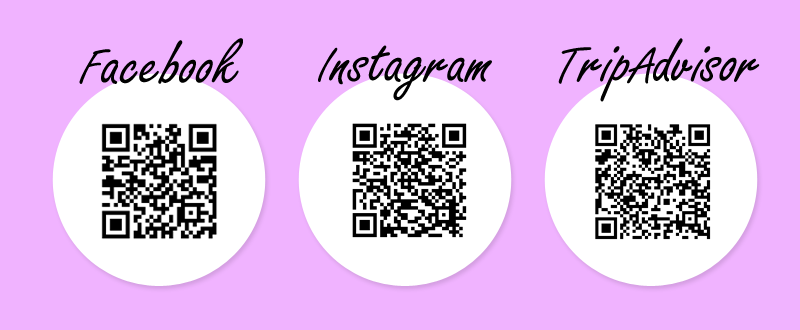
<style>
.page{position:relative;width:800px;height:330px;background:#f0b3ff}
.page>*{position:absolute;margin:0}
.t1{font:75px "DSNFreeJack";color:#000000}
.t2{font:75px "DSNFreeJack";color:#010101}
</style>
<div class="page">
<p class="t1" style="left:79px;top:38px;width:164px;height:46px">Facebook</p>
<p class="t2" style="left:558px;top:38px;width:202px;height:64px">TripAdvisor</p>
<p class="t1" style="left:318px;top:45px;width:174px;height:56px">Instagram</p>
</div>
